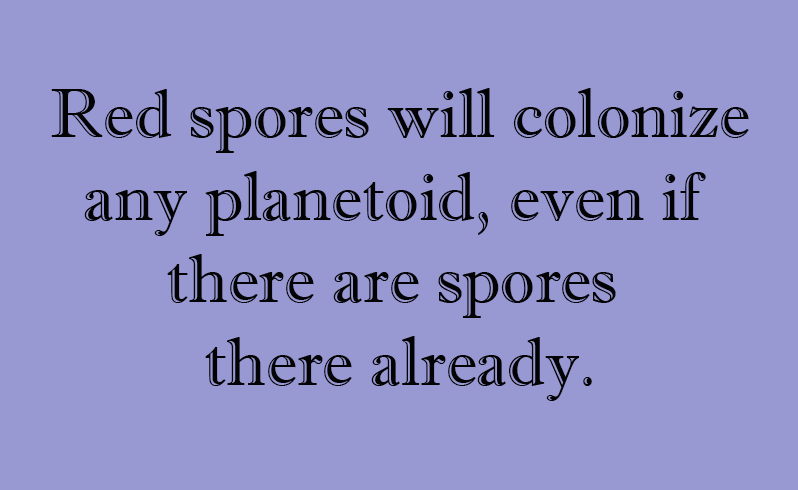
<style>
.page{position:relative;width:798px;height:490px;background:#9898d3}
.page>*{position:absolute;margin:0}
.t1{font:68.7px "ImprintMT-Shadow";color:#030303}
</style>
<div class="page">
<p class="t1" style="left:51px;top:88px;width:698px;height:313px;text-align:center">Red spores will colonize<br>any planetoid, even if <br>there are spores <br>there already.</p>
</div>
